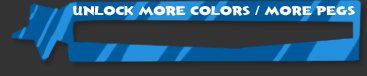
<style>
.page{position:relative;width:367px;height:76px;background:#333333}
.page>*{position:absolute;margin:0}
.t1{font:12.8px "AndersonTorchyTheBatteryBoy";color:#fdf8ff;scale:1.25 1}
</style>
<div class="page">
<p class="t1" style="left:73px;top:5px;width:282px;height:11px">unlock more Colors / more pegs</p>
</div>
